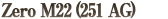
<style>
.page{position:relative;width:168px;height:19px;background:#ffffff}
.page>*{position:absolute;margin:0}
.t1{font:18px "RyuminPro-ExBold";letter-spacing:-0.06em;color:#4a3f32;font-weight:bold;scale:0.9 1}
</style>
<div class="page">
<p class="t1" style="left:1px;top:1px;width:135px;height:18px">Zero M22 (251 AG)</p>
</div>
